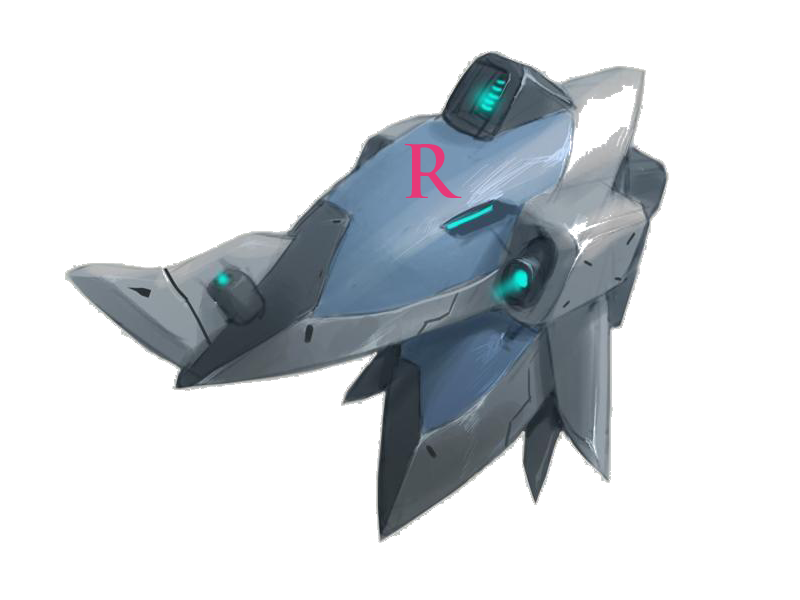
<style>
.page{position:relative;width:800px;height:600px;background:#ffffff}
.page>*{position:absolute;margin:0}
.t1{font:72px "TrajanPro-Bold";color:#e63978}
</style>
<div class="page">
<p class="t1" style="left:404px;top:144px;width:58px;height:54px">R</p>
</div>
